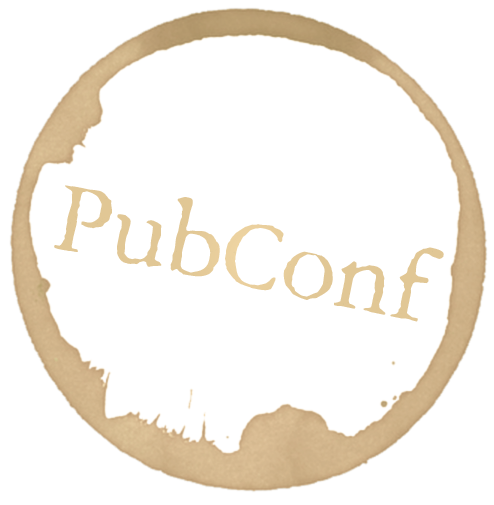
<style>
.page{position:relative;width:494px;height:505px;background:#ffffff}
.page>*{position:absolute;margin:0}
.t1{font:93px "Aquifer";color:#e1c795}
</style>
<div class="page">
<p class="t1" style="left:54px;top:185px;width:390px;height:137px;rotate:11deg">PubConf</p>
</div>
